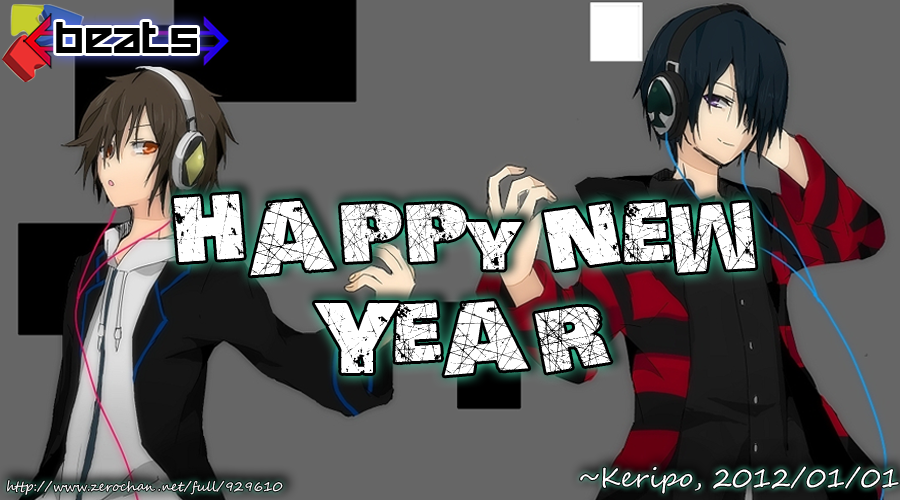
<style>
.page{position:relative;width:900px;height:500px;background:#666666}
.page>*{position:absolute;margin:0}
.t1{font:30.8px "HappyKiller";color:#000000;scale:1.05 1}
.t2{font:90.5px "ActionoftheTimeUpperLower";color:#ffffff;scale:1.08 1}
.t3{font:100.4px "ActionoftheTimeUpperLower";color:#ffffff;scale:1.08 1}
.t4{font:90.4px "ActionoftheTimeUpperLower";color:#ffffff;scale:1.08 1}
.t5{font:133.9px "ActionoftheTimeUpperLower";color:#ffffff;scale:1.08 1}
.t6{font:26.6px "SegoeScript";color:#ffffff}
.t7{font:13.1px "SegoeScript";color:#ffffff}
</style>
<div class="page">
<p class="t1" style="left:56px;top:22px;width:141px;height:31px">beats</p>
<p class="t2" style="left:174px;top:194px;width:582px;height:82px"><span class="t3">H</span>APPY <span class="t3">N</span>EW</p>
<p class="t4" style="left:314px;top:301px;width:297px;height:75px"><span class="t5">Y</span>EAR</p>
<p class="t6" style="left:580px;top:466px;width:319px;height:28px">~Keripo, 2012/01/01</p>
<p class="t7" style="left:7px;top:480px;width:276px;height:15px">http://www.zerochan.net/full/929610</p>
</div>
